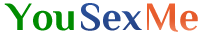
<style>
.page{position:relative;width:207px;height:33px;background:#ffffff}
.page>*{position:absolute;margin:0}
.t1{font:40px "Philosopher-Bold";color:#008c00}
.t2{font:40px "Philosopher-Bold";color:#284a91}
.t3{font:40px "Philosopher-Bold";color:#e85f2f}
</style>
<div class="page">
<p class="t1" style="left:4px;top:3px;width:70px;height:28px">You</p>
<p class="t2" style="left:81px;top:3px;width:61px;height:28px">Sex</p>
<p class="t3" style="left:147px;top:3px;width:51px;height:29px">Me</p>
</div>
